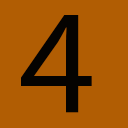
<style>
.page{position:relative;width:128px;height:128px;background:#b15d03}
.page>*{position:absolute;margin:0}
.t1{font:148.9px "MyriadHebrew-Regular";color:#050301}
</style>
<div class="page">
<p class="t1" style="left:21px;top:15px;width:71px;height:98px">4</p>
</div>
